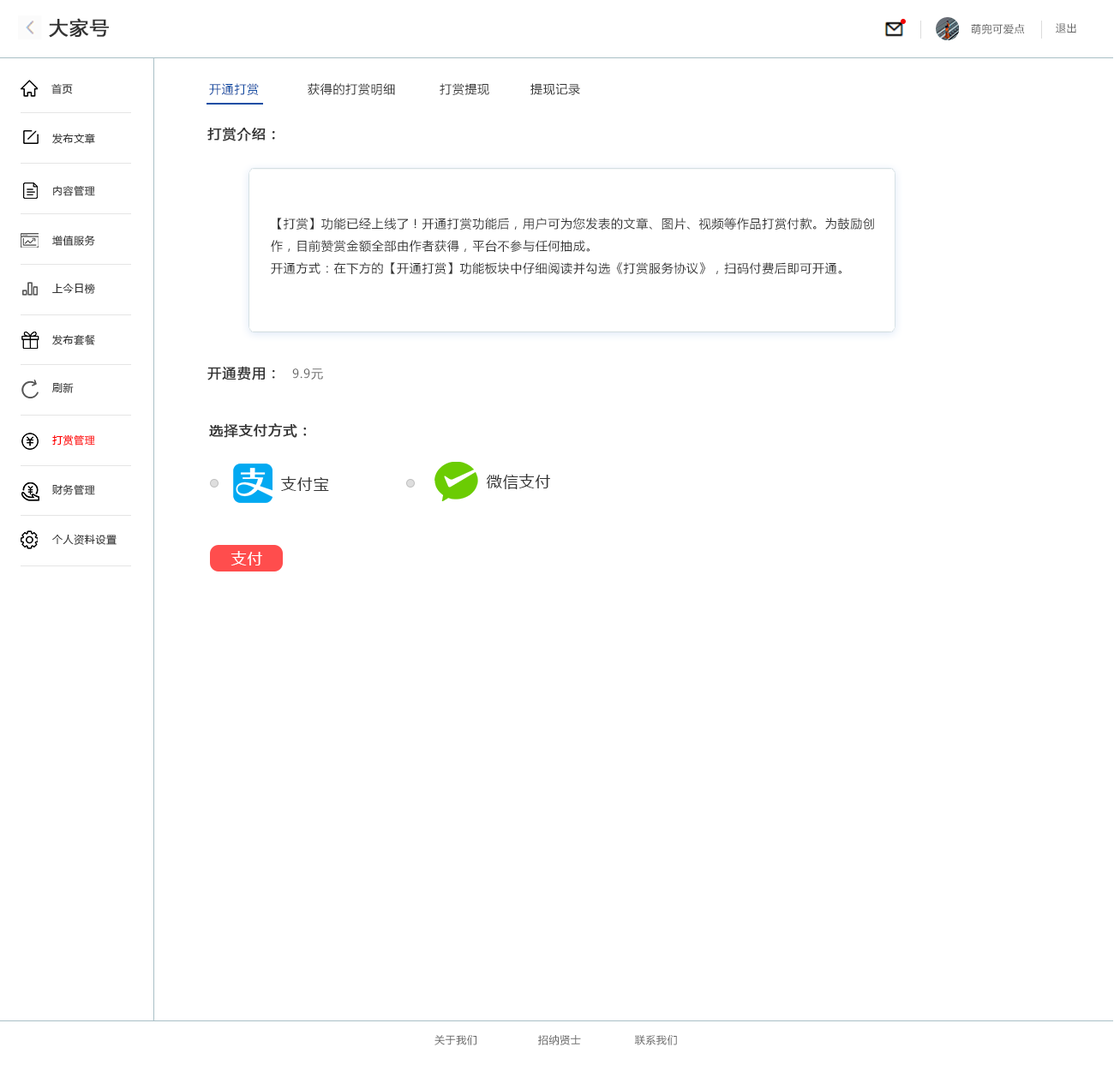
<style>
.page{position:relative;width:1114px;height:1071px;background:#ffffff}
.page>*{position:absolute;margin:0}
.t1{font:18.8px "MicrosoftYaHei";letter-spacing:0.05em;color:#333333;font-weight:bold}
.t2{font:10.3px "MicrosoftYaHei";letter-spacing:0.05em;color:#666666}
.t3{font:10.3px "MicrosoftYaHei";letter-spacing:0.05em;color:#333333}
.t4{font:12px "MicrosoftYaHei";letter-spacing:0.05em;color:#144ea4}
.t5{font:12px "MicrosoftYaHei";letter-spacing:0.05em;color:#333333}
.t6{font:13.7px "MicrosoftYaHei";letter-spacing:0.05em;color:#333333;font-weight:bold}
.t7{font:12px/5.1px "MicrosoftYaHei";letter-spacing:0.05em;color:#333333}
.t8{font:12px "MicrosoftYaHei";letter-spacing:0.05em;color:#666666}
.t9{font:10.3px "MicrosoftYaHei";letter-spacing:0.05em;color:#ff0000}
.t10{font:15.4px "MicrosoftYaHei";letter-spacing:0.05em;color:#333333}
.t11{font:15.4px "MicrosoftYaHei";letter-spacing:0.05em;color:#ffffff}
</style>
<div class="page">
<p class="t1" style="left:49px;top:18px;width:60px;height:20px">大家号</p>
<p class="t2" style="left:971px;top:24px;width:54px;height:10px">萌兜可爱点</p>
<p class="t2" style="left:1055px;top:23px;width:21px;height:10px">退出</p>
<p class="t3" style="left:51px;top:83px;width:22px;height:11px">首页</p>
<p class="t4" style="left:209px;top:83px;width:50px;height:12px">开通打赏</p>
<p class="t5" style="left:308px;top:83px;width:87px;height:12px">获得的打赏明细</p>
<p class="t5" style="left:439px;top:83px;width:50px;height:12px">打赏提现</p>
<p class="t5" style="left:530px;top:83px;width:50px;height:12px">提现记录</p>
<p class="t3" style="left:52px;top:133px;width:43px;height:11px">发布文章</p>
<p class="t6" style="left:207px;top:127px;width:68px;height:14px">打赏介绍：</p>
<p class="t3" style="left:53px;top:185px;width:42px;height:11px">内容管理</p>
<p class="t7" style="left:271px;top:218px;width:603px;height:56px">【打赏】功能已经上线了！开通打赏功能后，用户可为您发表的文章、图片、视频等作品打赏付款。为鼓励创<br>作，目前赞赏金额全部由作者获得，平台不参与任何抽成。<br>开通方式：在下方的【开通打赏】功能板块中仔细阅读并勾选《打赏服务协议》，扫码付费后即可开通。</p>
<p class="t3" style="left:52px;top:235px;width:43px;height:11px">增值服务</p>
<p class="t3" style="left:52px;top:283px;width:43px;height:11px">上今日榜</p>
<p class="t3" style="left:52px;top:334px;width:43px;height:11px">发布套餐</p>
<p class="t6" style="left:207px;top:366px;width:68px;height:14px">开通费用：</p>
<p class="t8" style="left:292px;top:368px;width:31px;height:11px">9.9元</p>
<p class="t3" style="left:52px;top:383px;width:22px;height:10px">刷新</p>
<p class="t6" style="left:209px;top:423px;width:98px;height:15px">选择支付方式：</p>
<p class="t9" style="left:52px;top:434px;width:43px;height:11px">打赏管理</p>
<p class="t10" style="left:487px;top:474px;width:63px;height:15px">微信支付</p>
<p class="t3" style="left:52px;top:484px;width:43px;height:11px">财务管理</p>
<p class="t10" style="left:281px;top:476px;width:48px;height:15px">支付宝</p>
<p class="t3" style="left:52px;top:534px;width:65px;height:11px">个人资料设置</p>
<p class="t11" style="left:230px;top:551px;width:32px;height:14px">支付</p>
<p class="t2" style="left:434px;top:1035px;width:243px;height:10px">关于我们                 招纳贤士               联系我们</p>
</div>
